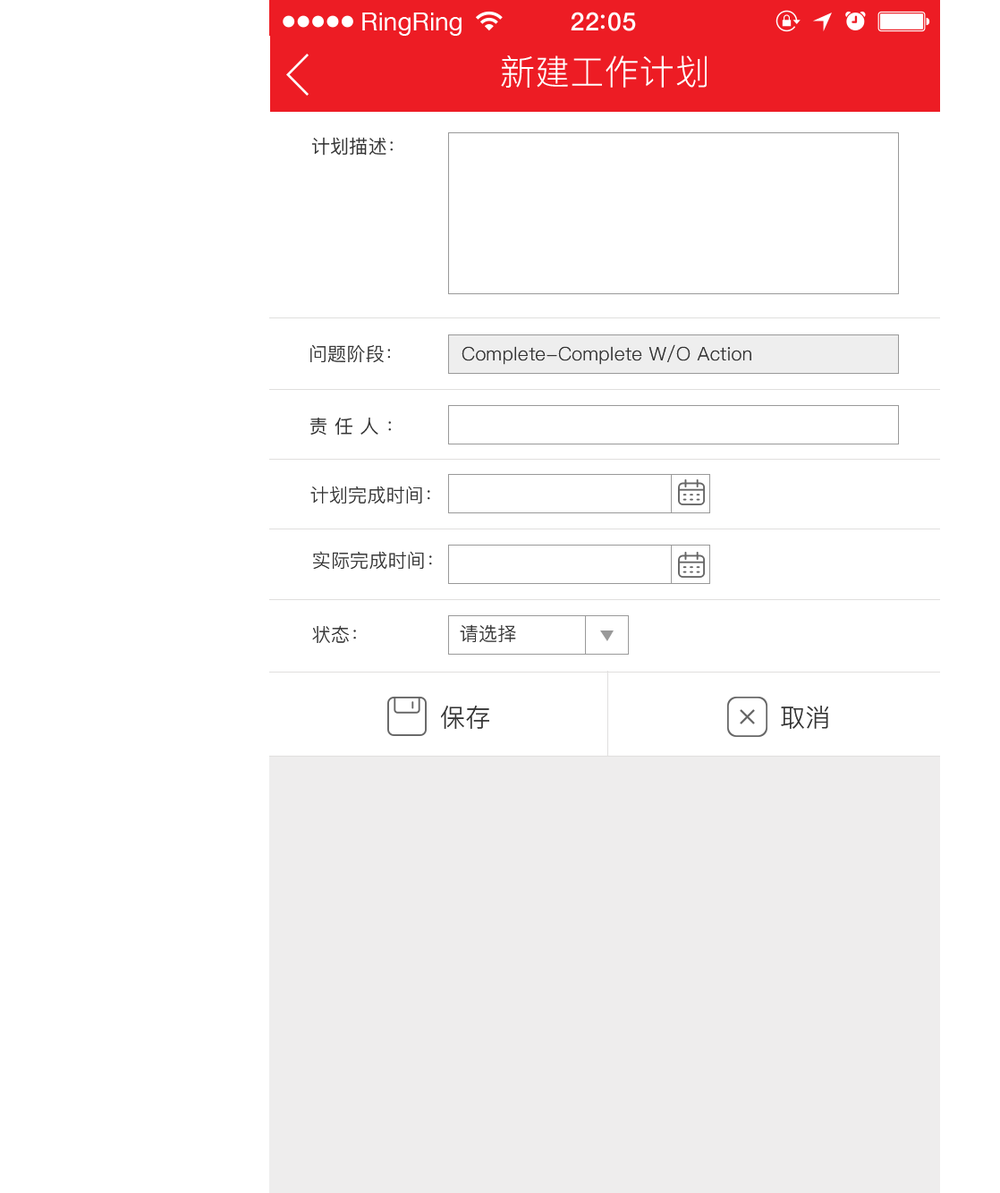
<style>
.page{position:relative;width:1000px;height:1193px;background:#ffffff}
.page>*{position:absolute;margin:0}
.t1{font:25.1px "HelveticaNeue";color:#ffffff}
.t2{font:25.1px "HelveticaNeue-Medium";letter-spacing:0.03em;color:#ffffff}
.t3{font:34.6px "PingFang-SC-Regular";letter-spacing:0.01em;color:#ffffff}
.t4{font:18.8px "PingFangSC-Regular";letter-spacing:0.01em;color:#333333}
.t5{font:18.8px "PingFang-SC-Regular";letter-spacing:0.01em;color:#333333}
.t6{font:18.8px "PingFangSC-Regular";letter-spacing:0.35em;color:#333333}
.t7{font:25px "PingFang-SC-Regular";letter-spacing:0.01em;color:#333333}
</style>
<div class="page">
<p class="t1" style="left:362px;top:13px;width:99px;height:23px">RingRing</p>
<p class="t2" style="left:570px;top:12px;width:66px;height:19px">22 05</p>
<p class="t3" style="left:501px;top:55px;width:205px;height:33px">新建工作计划</p>
<p class="t4" style="left:311px;top:137px;width:82px;height:19px">计划描述：</p>
<p class="t5" style="left:310px;top:344px;width:80px;height:18px">问题阶段：</p>
<p class="t5" style="left:461px;top:344px;width:290px;height:21px">Complete-Complete W/O Action</p>
<p class="t6" style="left:309px;top:417px;width:82px;height:18px">责任人：</p>
<p class="t5" style="left:310px;top:486px;width:120px;height:18px">计划完成时间：</p>
<p class="t5" style="left:313px;top:551px;width:119px;height:19px">实际完成时间：</p>
<p class="t5" style="left:312px;top:625px;width:44px;height:18px">状态：</p>
<p class="t5" style="left:460px;top:624px;width:56px;height:18px">请选择</p>
<p class="t7" style="left:441px;top:705px;width:48px;height:24px">保存</p>
<p class="t7" style="left:781px;top:705px;width:47px;height:24px">取消</p>
</div>
